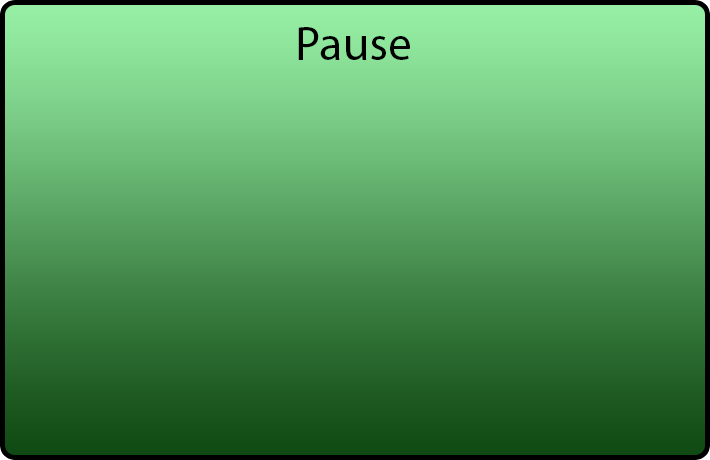
<style>
.page{position:relative;width:710px;height:460px}
.page>*{position:absolute;margin:0}
.t1{font:48px "MyriadHebrew-Regular";color:#000000}
</style>
<div class="page">
<p class="t1" style="left:298px;top:27px;width:112px;height:33px">Pause</p>
</div>
